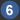
<style>
.page{position:relative;width:20px;height:20px;background:#3b5f97}
.page>*{position:absolute;margin:0}
.t1{font:14px "Arial-BoldMT";letter-spacing:0.025em;color:#fcfdfd}
</style>
<div class="page">
<p class="t1" style="left:6px;top:5px;width:7px;height:11px">6</p>
</div>
